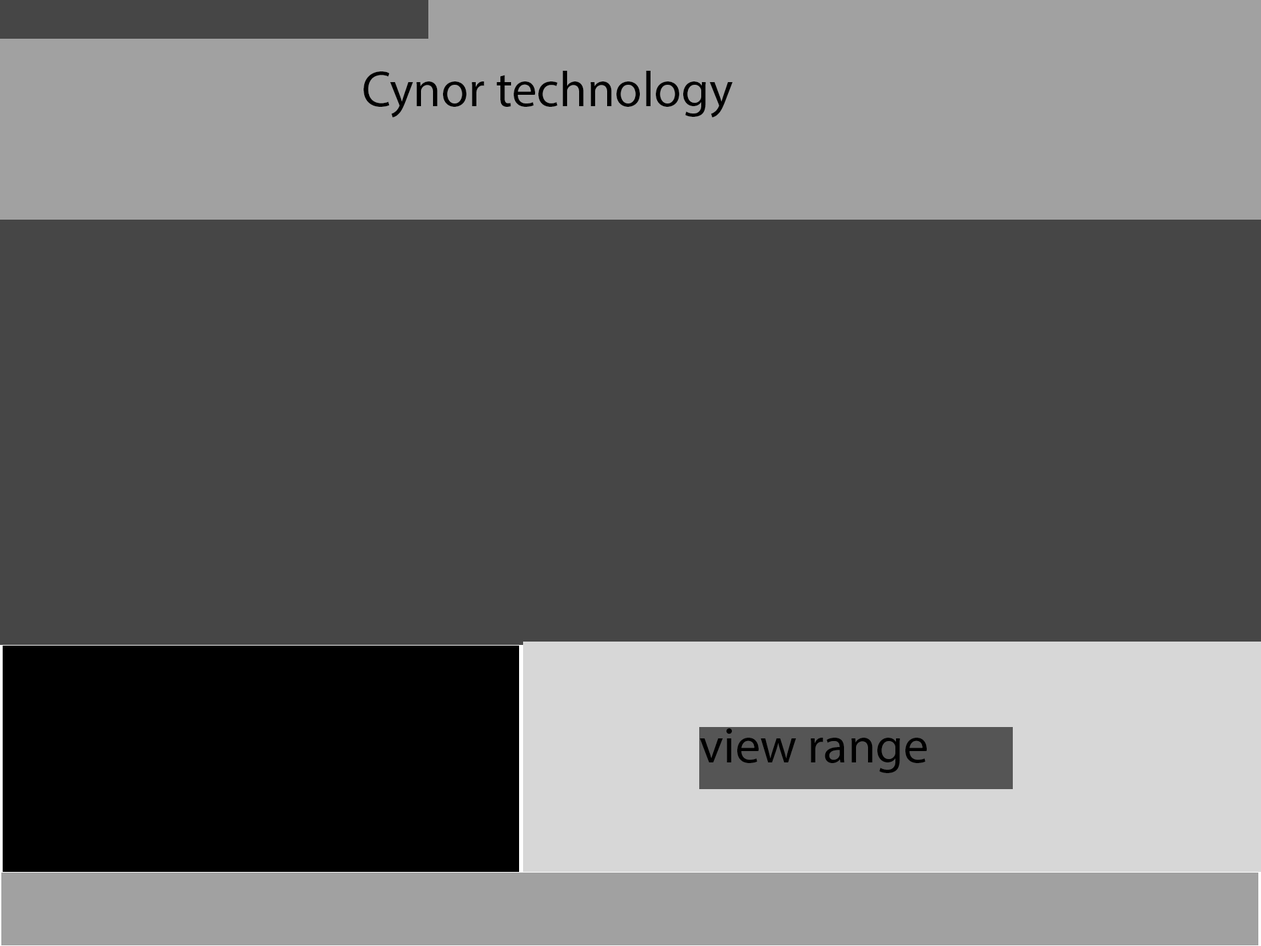
<style>
.page{position:relative;width:1261px;height:946px;background:#464646}
.page>*{position:absolute;margin:0}
.t1{font:50px "MyriadPro-Regular";color:#000000}
</style>
<div class="page">
<p class="t1" style="left:364px;top:71px;width:369px;height:46px">Cynor technology</p>
<p class="t1" style="left:700px;top:728px;width:227px;height:45px">view range</p>
</div>
